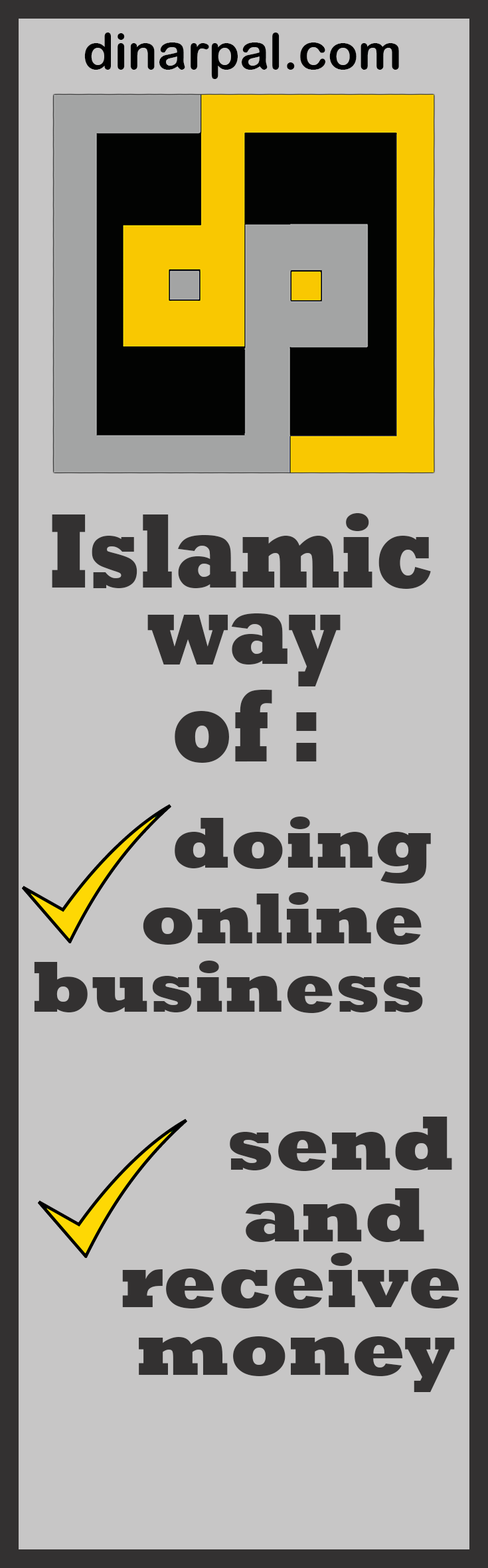
<style>
.page{position:relative;width:488px;height:1568px;background:#c7c6c6}
.page>*{position:absolute;margin:0}
.t1{font:49.8px "ArialRoundedMTBold";color:#000000}
.t2{font:107.5px "Rockwell-ExtraBold";color:#333131;scale:0.79 1}
.t3{font:103.3px "Rockwell-ExtraBold";color:#333131;scale:0.79 1}
.t4{font:73.5px "Rockwell-ExtraBold";color:#333131}
.t5{font:78.1px "Rockwell-ExtraBold";color:#333131}
</style>
<div class="page">
<p class="t1" style="left:84px;top:33px;width:315px;height:46px">dinarpal.com</p>
<p class="t2" style="left:52px;top:513px;width:379px;height:76px">Islamic</p>
<p class="t3" style="left:147px;top:613px;width:194px;height:73px">way</p>
<p class="t3" style="left:175px;top:690px;width:142px;height:73px">of :</p>
<p class="t4" style="left:175px;top:817px;width:256px;height:67px">doing</p>
<p class="t4" style="left:143px;top:892px;width:279px;height:53px">online</p>
<p class="t4" style="left:34px;top:961px;width:389px;height:52px">business</p>
<p class="t5" style="left:230px;top:1117px;width:222px;height:54px">send</p>
<p class="t5" style="left:245px;top:1188px;width:179px;height:54px">and</p>
<p class="t5" style="left:122px;top:1253px;width:337px;height:55px">receive</p>
<p class="t5" style="left:139px;top:1336px;width:316px;height:56px">money</p>
</div>
